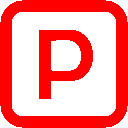
<style>
.page{position:relative;width:128px;height:128px;background:#ffffff}
.page>*{position:absolute;margin:0}
.t1{font:100px "BerlinSansFB-Reg";color:#ff0000}
</style>
<div class="page">
<p class="t1" style="left:39px;top:30px;width:54px;height:69px">P</p>
</div>
